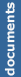
<style>
.page{position:relative;width:21px;height:77px;background:#336699}
.page>*{position:absolute;margin:0}
.t1{font:12px "Verdana-Bold";color:#f7f7f7}
</style>
<div class="page">
<p class="t1" style="left:4px;top:2px;width:11px;height:74px;rotate:-90deg">documents</p>
</div>
